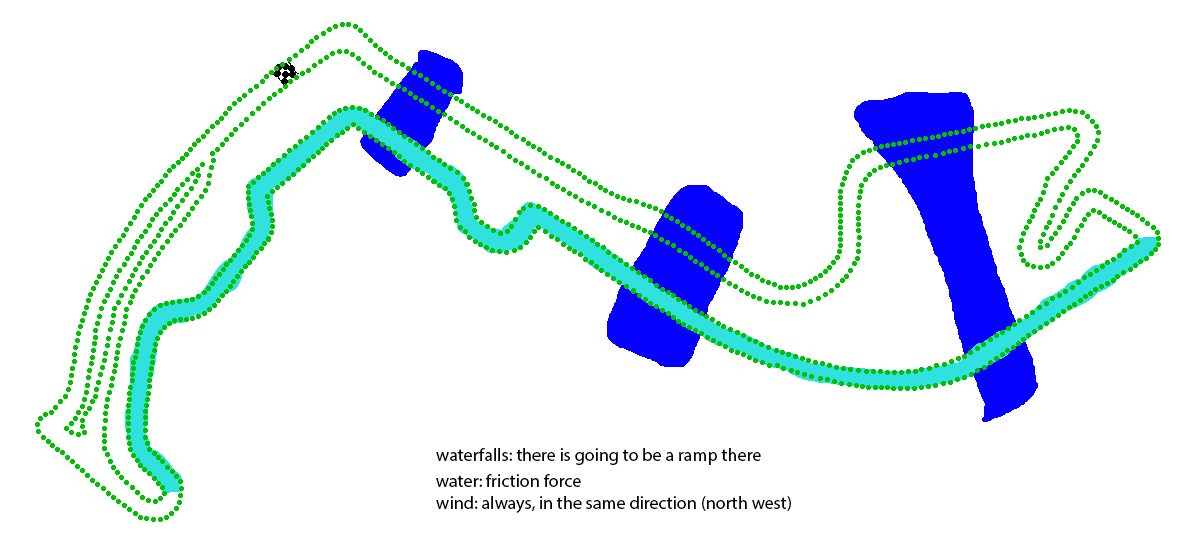
<style>
.page{position:relative;width:1200px;height:553px;background:#ffffff}
.page>*{position:absolute;margin:0}
.t1{font:18px "MyriadPro-Regular";color:#000000}
</style>
<div class="page">
<p class="t1" style="left:436px;top:448px;width:325px;height:17px">waterfalls: there is going to be a ramp there</p>
<p class="t1" style="left:436px;top:474px;width:145px;height:13px">water: friction force</p>
<p class="t1" style="left:436px;top:496px;width:355px;height:17px">wind: always, in the same direction (north west)</p>
</div>
